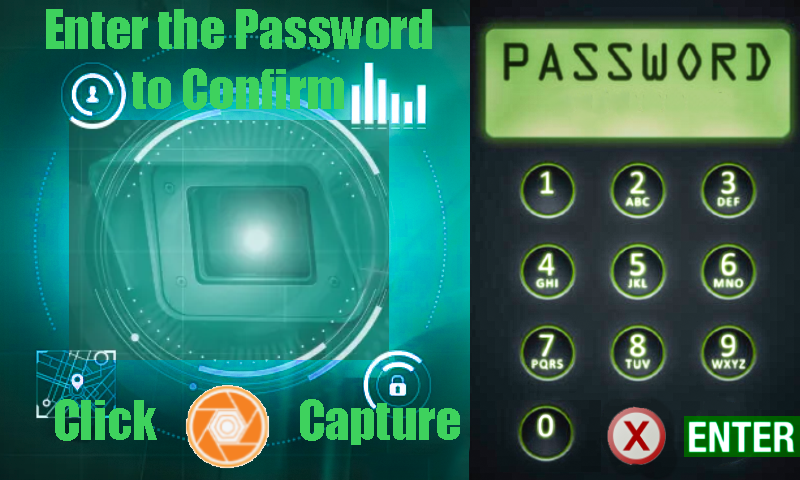
<style>
.page{position:relative;width:800px;height:480px}
.page>*{position:absolute;margin:0}
.t1{font:50px "Impact";color:#3ed25d}
</style>
<div class="page">
<p class="t1" style="left:46px;top:9px;width:386px;height:101px">Enter the Password <br>           to Confirm</p>
<p class="t1" style="left:55px;top:399px;width:405px;height:46px">Click                Capture</p>
</div>
